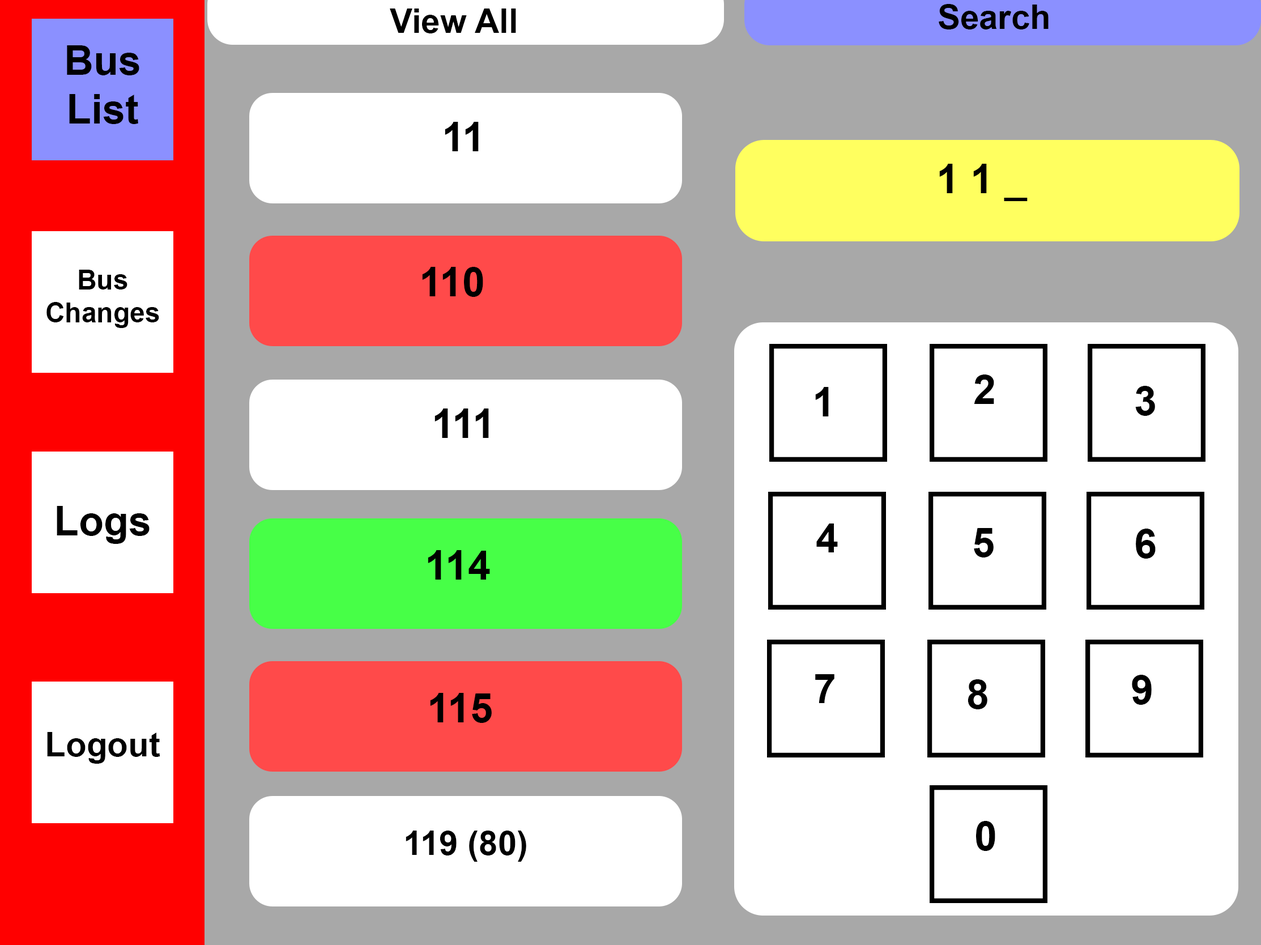
<style>
.page{position:relative;width:1261px;height:945px;background:#ffffff}
.page>*{position:absolute;margin:0}
.t1{font:34px "Arial-BoldMT";color:#000000}
.t2{font:40.8px "Arial-BoldMT";color:#000000}
.t3{font:27.2px "Arial-BoldMT";color:#000000}
</style>
<div class="page">
<p class="t1" style="left:939px;top:4px;width:110px;height:25px">Search</p>
<p class="t1" style="left:390px;top:9px;width:126px;height:24px">View All</p>
<p class="t2" style="left:67px;top:45px;width:72px;height:79px;text-align:center">Bus List</p>
<p class="t2" style="left:445px;top:122px;width:34px;height:29px">11</p>
<p class="t2" style="left:940px;top:164px;width:88px;height:37px">1 1 _</p>
<p class="t3" style="left:46px;top:270px;width:113px;height:58px;text-align:center">Bus Changes</p>
<p class="t2" style="left:422px;top:267px;width:61px;height:30px">110</p>
<p class="t2" style="left:974px;top:375px;width:21px;height:29px">2</p>
<p class="t2" style="left:815px;top:387px;width:14px;height:30px">1</p>
<p class="t2" style="left:1136px;top:386px;width:20px;height:30px">3</p>
<p class="t2" style="left:435px;top:409px;width:54px;height:29px">111</p>
<p class="t2" style="left:57px;top:506px;width:93px;height:38px">Logs</p>
<p class="t2" style="left:817px;top:524px;width:21px;height:29px">4</p>
<p class="t2" style="left:974px;top:528px;width:20px;height:30px">5</p>
<p class="t2" style="left:1136px;top:529px;width:20px;height:30px">6</p>
<p class="t2" style="left:428px;top:550px;width:62px;height:30px">114</p>
<p class="t2" style="left:815px;top:674px;width:20px;height:29px">7</p>
<p class="t2" style="left:1132px;top:675px;width:20px;height:30px">9</p>
<p class="t2" style="left:968px;top:679px;width:20px;height:31px">8</p>
<p class="t2" style="left:430px;top:693px;width:62px;height:30px">115</p>
<p class="t1" style="left:47px;top:732px;width:113px;height:32px">Logout</p>
<p class="t2" style="left:976px;top:821px;width:20px;height:30px">0</p>
<p class="t1" style="left:406px;top:831px;width:120px;height:31px">119 (80)</p>
</div>
